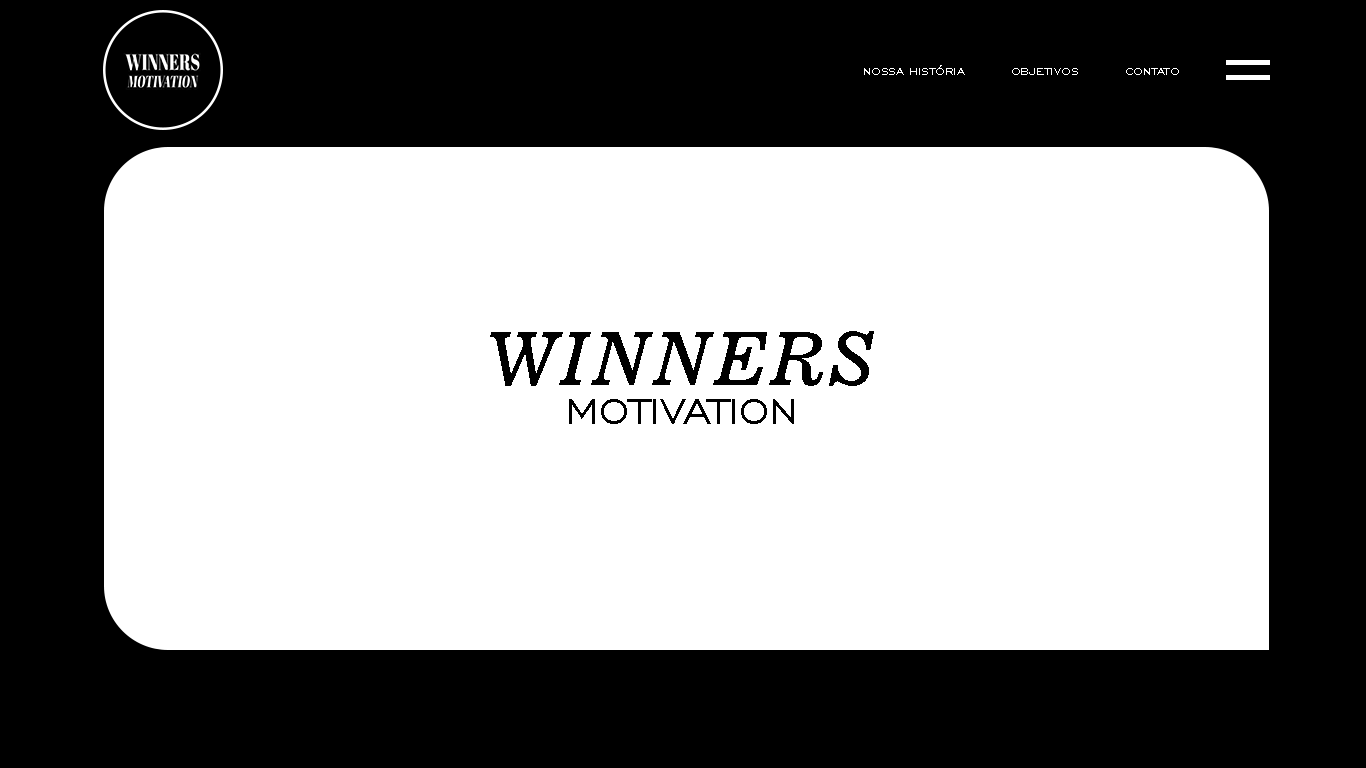
<style>
.page{position:relative;width:1366px;height:768px;background:#ffffff}
.page>*{position:absolute;margin:0}
.t1{font:16px "EngraversGothicBT-Regular";color:#ffffff}
.t2{font:73.5px "News701BT-ItalicA";color:#000000}
.t3{font:47.2px "EngraversGothicBT-Regular";color:#000000}
</style>
<div class="page">
<p class="t1" style="left:864px;top:65px;width:101px;height:10px">nossa história</p>
<p class="t1" style="left:1012px;top:68px;width:66px;height:7px">objetivos</p>
<p class="t1" style="left:1126px;top:68px;width:53px;height:7px">contato</p>
<p class="t2" style="left:490px;top:331px;width:384px;height:55px">WINNERS</p>
<p class="t3" style="left:569px;top:399px;width:225px;height:25px">MOTIVATION</p>
</div>
